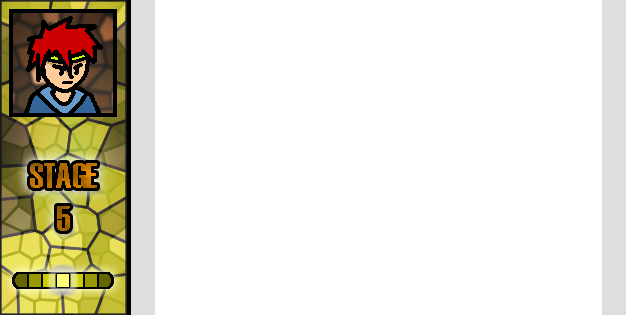
<style>
.page{position:relative;width:626px;height:315px;background:#ffffff}
.page>*{position:absolute;margin:0}
.t1{font:36px "Haettenschweiler"}
</style>
<div class="page">
<p class="t1" style="left:30px;top:163px;width:67px;height:68px;text-align:center">STAGE<br>5</p>
</div>
